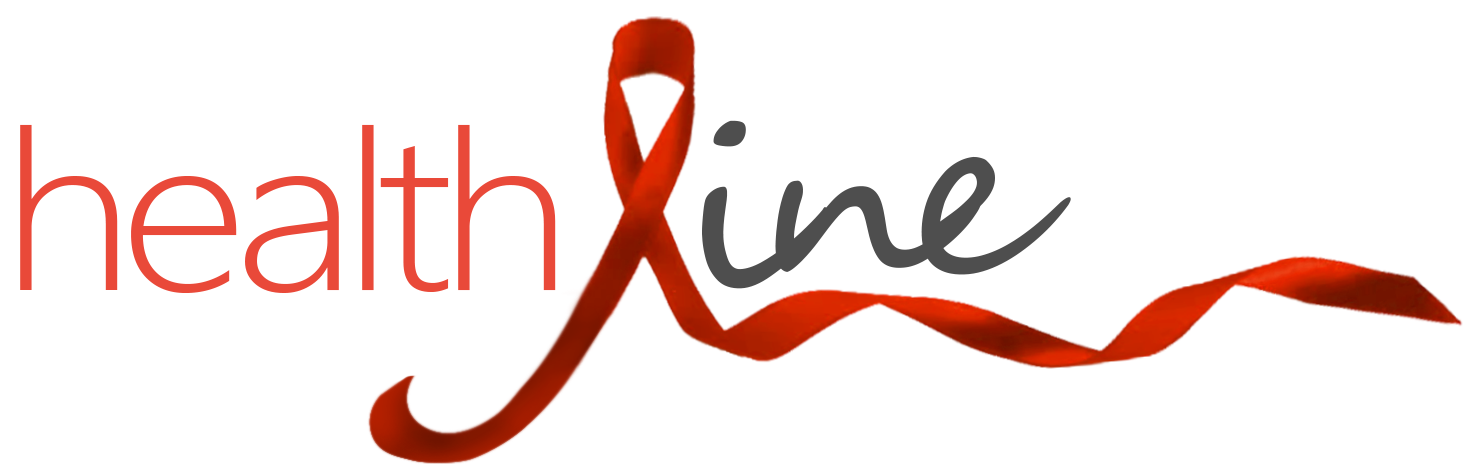
<style>
.page{position:relative;width:1468px;height:464px;background:#ffffff}
.page>*{position:absolute;margin:0}
.t1{font:223px "SegoeUI-Light";letter-spacing:-0.06em;color:#e94939;scale:1.13 1}
.t2{font:220.2px "SegoeScript";letter-spacing:-0.16em;color:#4e4e4e;scale:1.13 1}
</style>
<div class="page">
<p class="t1" style="left:20px;top:124px;width:536px;height:169px">health</p>
<p class="t2" style="left:702px;top:120px;width:369px;height:169px;rotate:-2deg">ine</p>
</div>
